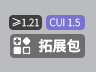
<style>
.page{position:relative;width:96px;height:72px;background:#bbbcbf}
.page>*{position:absolute;margin:0}
.t1{font:10px "NotoSansSC-Thin";color:#ffffff;font-weight:bold}
.t2{font:14px "NotoSansSC-Medium";color:#ffffff;font-weight:bold}
</style>
<div class="page">
<p class="t1" style="left:12px;top:18px;width:27px;height:9px">≥1.21</p>
<p class="t1" style="left:49px;top:18px;width:31px;height:9px">CUI 1.5</p>
<p class="t2" style="left:38px;top:39px;width:43px;height:14px">拓展包</p>
</div>
